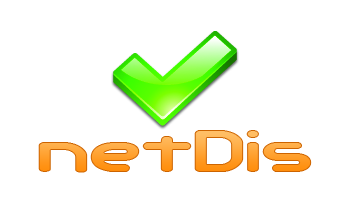
<style>
.page{position:relative;width:355px;height:209px;background:#ffffff}
.page>*{position:absolute;margin:0}
.t1{font:60px "AutomaticaBRK"}
</style>
<div class="page">
<p class="t1" style="left:38px;top:130px;width:274px;height:43px">netDis</p>
</div>
